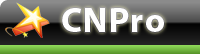
<style>
.page{position:relative;width:200px;height:54px}
.page>*{position:absolute;margin:0}
.t1{font:35px "MyriadPro-Bold";letter-spacing:0.04em;color:#fefefe}
</style>
<div class="page">
<p class="t1" style="left:62px;top:8px;width:102px;height:24px">CNPro</p>
</div>
